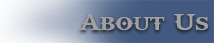
<style>
.page{position:relative;width:214px;height:43px}
.page>*{position:absolute;margin:0}
.t1{font:26px "GodOfWar";color:#a1a1a1}
</style>
<div class="page">
<p class="t1" style="left:79px;top:14px;width:130px;height:16px">About Us</p>
</div>
